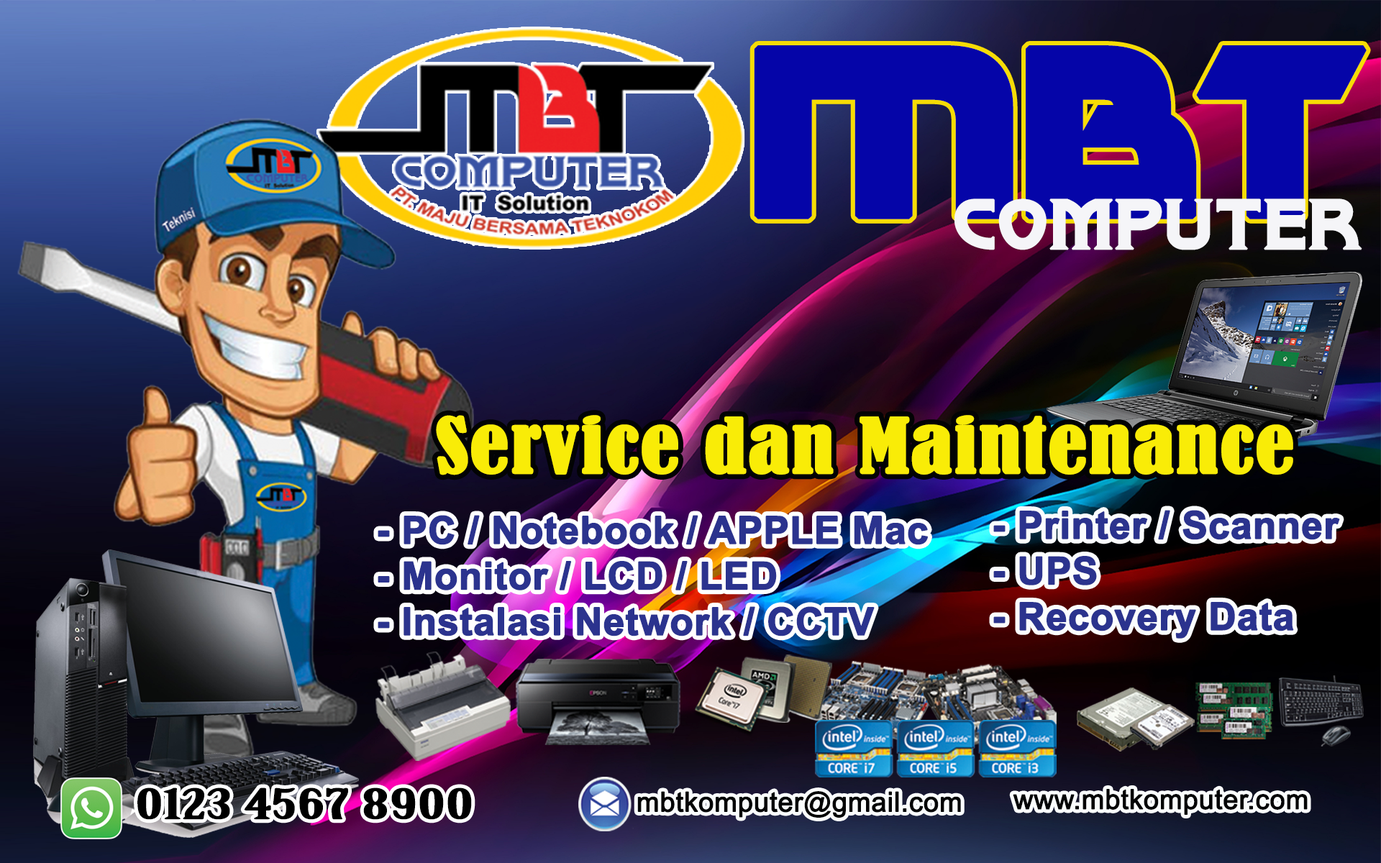
<style>
.page{position:relative;width:1381px;height:863px}
.page>*{position:absolute;margin:0}
.t1{font:244.5px "DubaiDubstep";color:#0505a8;font-weight:bold;scale:1.05 1}
.t2{font:60.2px "BrownwoodNF";color:#f5f5f8;font-weight:bold;scale:1.06 1}
.t3{font:70.7px "BernardMT-Condensed";color:#f9ec07;font-weight:bold;scale:1.21 1}
.t4{font:38.1px "Arial-BoldMT";color:#2b338e;font-weight:bold}
.t5{font:40.3px "BirchStd";color:#000000;font-weight:bold;scale:2.09 1}
.t6{font:27.3px "ArialMT";color:#030405;font-weight:bold}
</style>
<div class="page">
<p class="t1" style="left:754px;top:45px;width:613px;height:174px">MBT</p>
<p class="t2" style="left:954px;top:199px;width:409px;height:51px">COMPUTER</p>
<p class="t3" style="left:436px;top:415px;width:857px;height:61px">Service dan Maintenance</p>
<p class="t4" style="left:378px;top:515px;width:550px;height:122px;text-align:justify">- PC / Notebook / APPLE Mac<br>- Monitor / LCD / LED<br>- Instalasi Network / CCTV</p>
<p class="t5" style="left:137px;top:788px;width:335px;height:32px">0123 4567 8900</p>
<p class="t6" style="left:637px;top:791px;width:324px;height:27px">mbtkomputer@gmail.com</p>
<p class="t6" style="left:1013px;top:789px;width:295px;height:26px">www.mbtkomputer.com</p>
</div>
